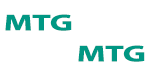
<style>
.page{position:relative;width:150px;height:75px;background:#ffffff}
.page>*{position:absolute;margin:0}
.t1{font:23.2px "MyriadHebrew-Bold";color:#009783;scale:1.46 1}
</style>
<div class="page">
<p class="t1" style="left:5px;top:14px;width:67px;height:17px">MTG</p>
<p class="t1" style="left:78px;top:45px;width:67px;height:17px">MTG</p>
</div>
